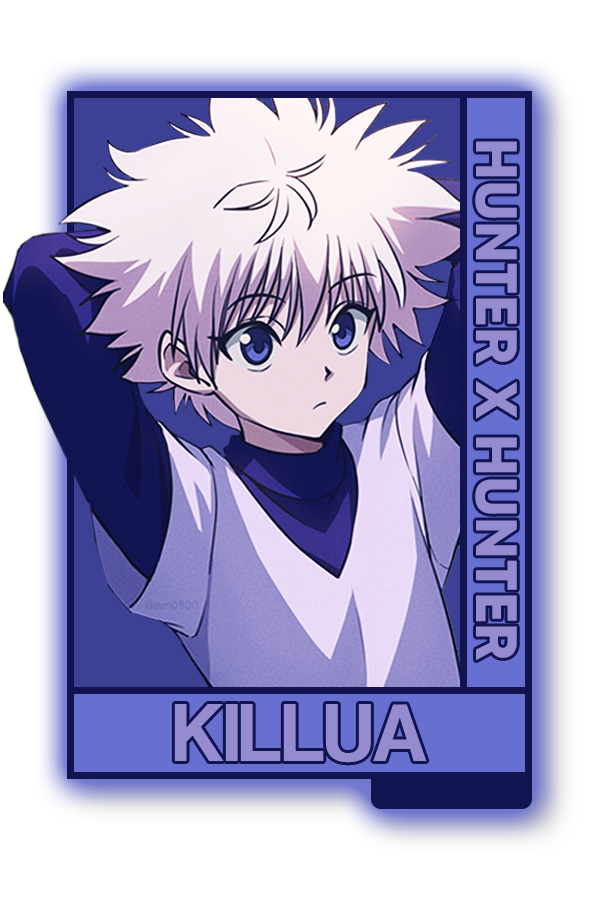
<style>
.page{position:relative;width:600px;height:900px;background:#ffffff}
.page>*{position:absolute;margin:0}
.t1{font:58.3px "MADETOMMY-Bold";color:#948cce}
.t2{font:84.2px "CoolveticaRg-Regular";color:#948cce}
</style>
<div class="page">
<p class="t1" style="left:475px;top:141px;width:42px;height:520px;rotate:90deg">HUNTER X HUNTER</p>
<p class="t2" style="left:174px;top:704px;width:253px;height:59px">KILLUA</p>
</div>
